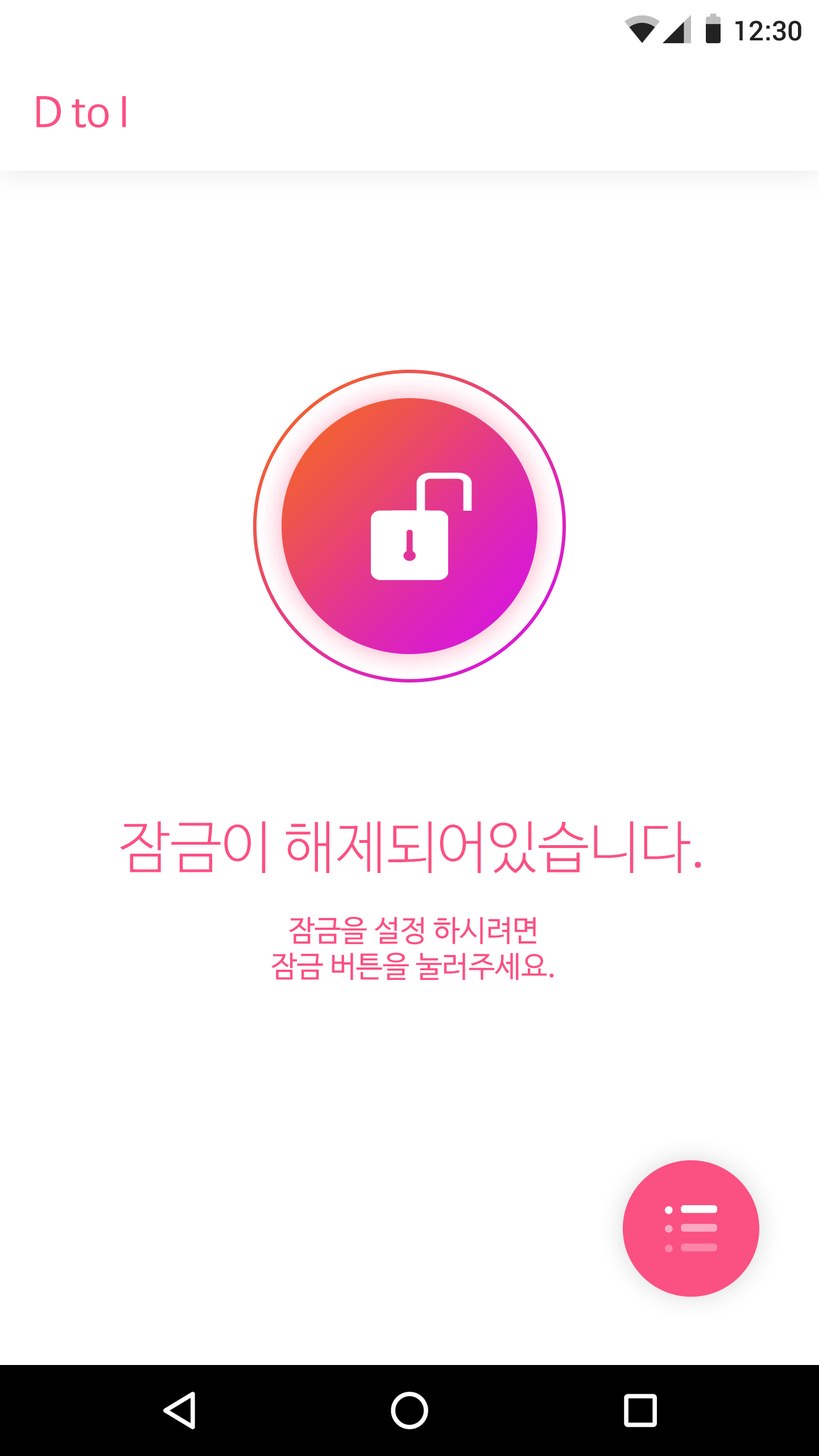
<style>
.page{position:relative;width:819px;height:1456px;background:#ffffff}
.page>*{position:absolute;margin:0}
.t1{font:27.3px "Roboto-Medium";color:#222222}
.t2{font:40.9px "NanumBarunGothic";color:#fb5082}
.t3{font:56.9px "NanumBarunGothicLight";color:#fb5082}
.t4{font:29.6px "NanumBarunGothic";color:#fb5082}
</style>
<div class="page">
<p class="t1" style="left:735px;top:20px;width:66px;height:21px">12:30</p>
<p class="t2" style="left:36px;top:96px;width:90px;height:32px">D to I</p>
<p class="t3" style="left:120px;top:821px;width:581px;height:53px">잠금이 해제되어있습니다.</p>
<p class="t4" style="left:271px;top:917px;width:283px;height:63px;text-align:center">잠금을 설정 하시려면<br>잠금 버튼을 눌러주세요.</p>
</div>
